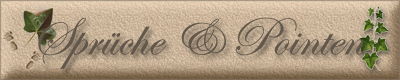
<style>
.page{position:relative;width:400px;height:80px}
.page>*{position:absolute;margin:0}
.t1{font:55px "EdwardianScriptITC";color:#62574b}
</style>
<div class="page">
<p class="t1" style="left:38px;top:17px;width:330px;height:52px">Sprüche &amp; Pointen</p>
</div>
